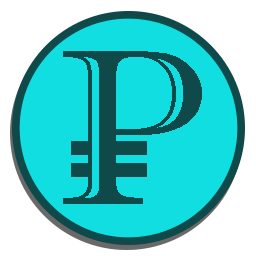
<style>
.page{position:relative;width:256px;height:256px;background:#11dee0}
.page>*{position:absolute;margin:0}
.t1{font:221.7px "ImprintMT-Shadow";color:#0f494a}
</style>
<div class="page">
<p class="t1" style="left:63px;top:51px;width:139px;height:153px">P</p>
</div>
